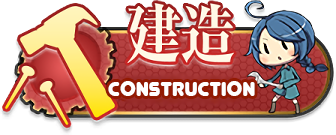
<style>
.page{position:relative;width:336px;height:135px;background:#ffffff}
.page>*{position:absolute;margin:0}
.t1{font:24px "Junegull";color:#ffffff}
</style>
<div class="page">
<p class="t1" style="left:108px;top:81px;width:147px;height:15px">CONSTRUCTION</p>
</div>
